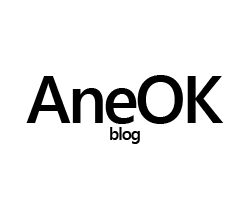
<style>
.page{position:relative;width:250px;height:200px;background:#ffffff}
.page>*{position:absolute;margin:0}
.t1{font:66.7px "SegoeUI-Semibold";letter-spacing:-0.05em;color:#000000}
.t2{font:16.7px "SegoeUI-Semibold";letter-spacing:-0.05em;color:#000000}
</style>
<div class="page">
<p class="t1" style="left:26px;top:75px;width:198px;height:49px">AneOK</p>
<p class="t2" style="left:110px;top:127px;width:30px;height:17px">blog</p>
</div>
